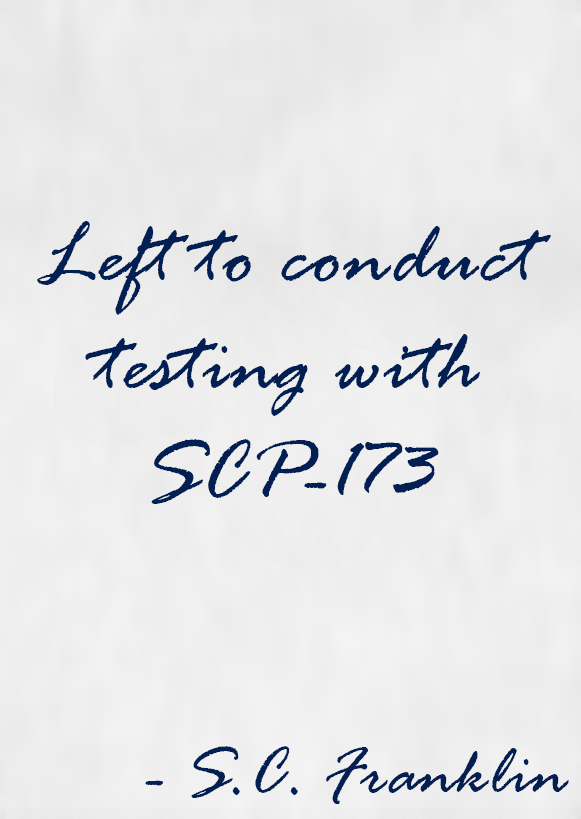
<style>
.page{position:relative;width:581px;height:819px}
.page>*{position:absolute;margin:0}
.t1{font:90px "RageItalic";letter-spacing:0.01em;color:#011f52}
.t2{font:72px "RageItalic";letter-spacing:0.01em;color:#011f52}
</style>
<div class="page">
<p class="t1" style="left:37px;top:221px;width:514px;height:283px;text-align:center">Left to conduct testing with SCP-173</p>
<p class="t2" style="left:145px;top:746px;width:424px;height:58px">- S.C. Franklin</p>
</div>
